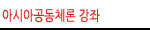
<style>
.page{position:relative;width:150px;height:30px;background:#ffffff}
.page>*{position:absolute;margin:0}
.t1{font:14px "NanumGothic";color:#dc241f;scale:0.8 1}
</style>
<div class="page">
<p class="t1" style="left:2px;top:9px;width:98px;height:14px">아시아공동체론 강좌</p>
</div>
